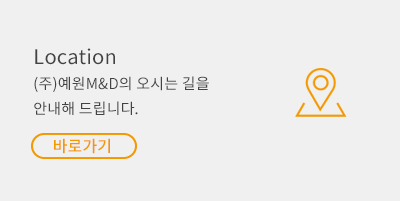
<style>
.page{position:relative;width:400px;height:201px;background:#f0f0f0}
.page>*{position:absolute;margin:0}
.t1{font:15px/25px "NotoSansCJKkr-Regular";letter-spacing:0.01em;color:#434343}
.t2{font:20px/35.5px "NotoSansCJKkr-Regular";letter-spacing:0.01em;color:#434343}
.t3{font:16px "NotoSansCJKkr-Medium";letter-spacing:0.01em;color:#f39800}
</style>
<div class="page">
<p class="t1" style="left:34px;top:48px;width:175px;height:67px"><span class="t2">Location<br></span>(주)예원M&amp;D의 오시는 길을 <br>안내해 드립니다.</p>
<p class="t3" style="left:54px;top:138px;width:56px;height:16px">바로가기</p>
</div>
